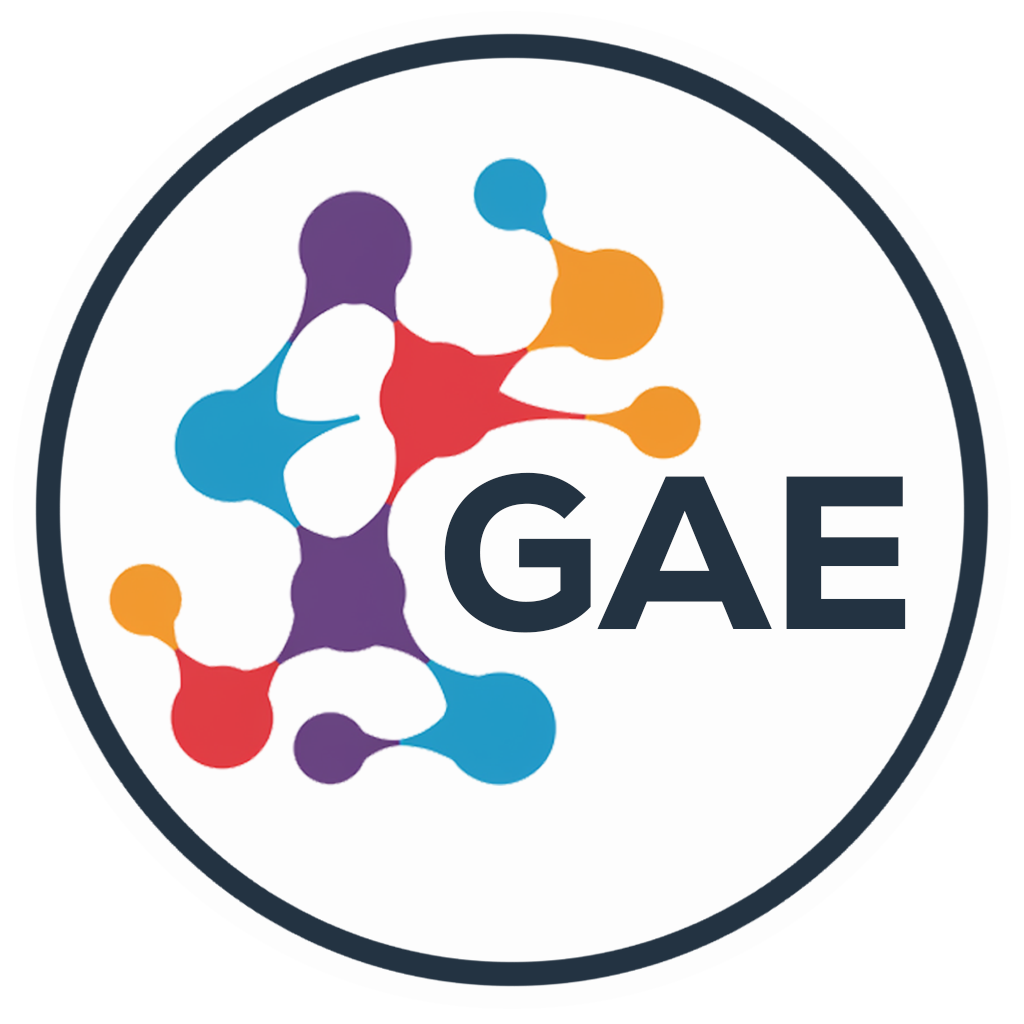
<style>
.page{position:relative;width:1024px;height:1024px;background:#fdfdfd}
.page>*{position:absolute;margin:0}
.t1{font:217.8px "Nexa-Heavy";color:#233342}
</style>
<div class="page">
<p class="t1" style="left:444px;top:472px;width:462px;height:161px">GAE</p>
</div>
